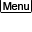
<style>
.page{position:relative;width:32px;height:32px;background:#ffffff}
.page>*{position:absolute;margin:0}
.t1{font:10.7px "ArialMT";color:#000000}
</style>
<div class="page">
<p class="t1" style="left:3px;top:2px;width:26px;height:8px">Menu</p>
</div>
